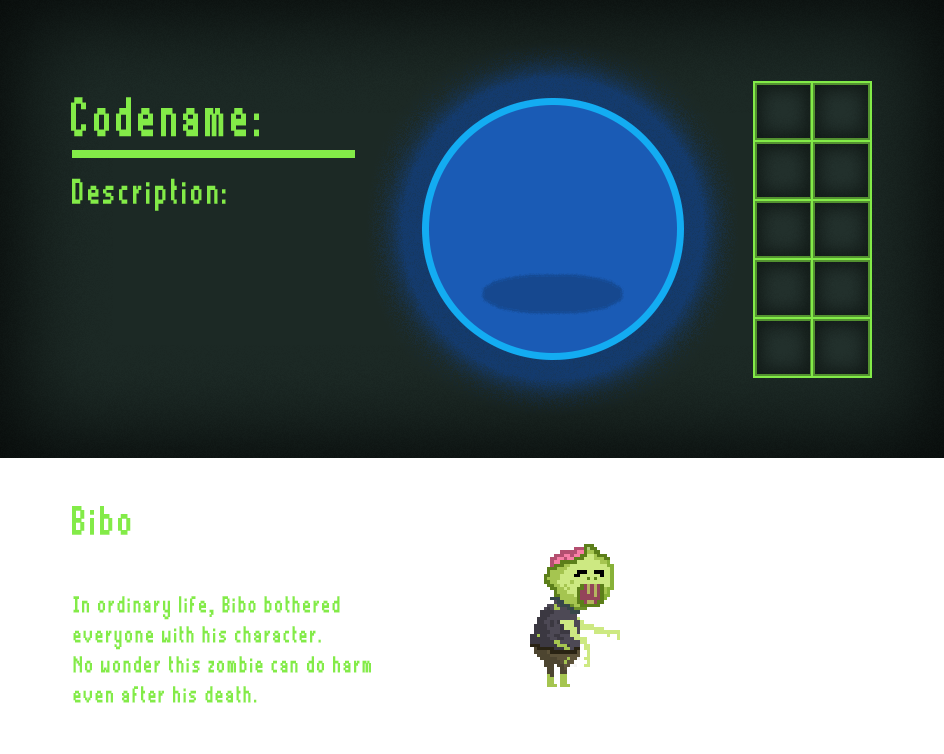
<style>
.page{position:relative;width:944px;height:754px;background:#ffffff}
.page>*{position:absolute;margin:0}
.t1{font:86.4px "Thintel";letter-spacing:0.075em;color:#83eb48;font-weight:bold;scale:0.62 1}
.t2{font:55.2px "Thintel";letter-spacing:0.075em;color:#83eb48;font-weight:bold;scale:0.69 1}
.t3{font:63.7px "Thintel";letter-spacing:0.075em;color:#83eb48;font-weight:bold;scale:0.69 1}
.t4{font:36px "Thintel";letter-spacing:0.075em;color:#83eb48;font-weight:bold;scale:0.69 1}
</style>
<div class="page">
<p class="t1" style="left:71px;top:97px;width:188px;height:40px">Codename:</p>
<p class="t2" style="left:72px;top:178px;width:154px;height:33px">Description:</p>
<p class="t3" style="left:72px;top:506px;width:59px;height:29px">Bibo</p>
<p class="t4" style="left:73px;top:596px;width:298px;height:107px">In ordinary life, Bibo bothered <br>everyone with his character. <br>No wonder this zombie can do harm<br>even after his death.</p>
</div>
